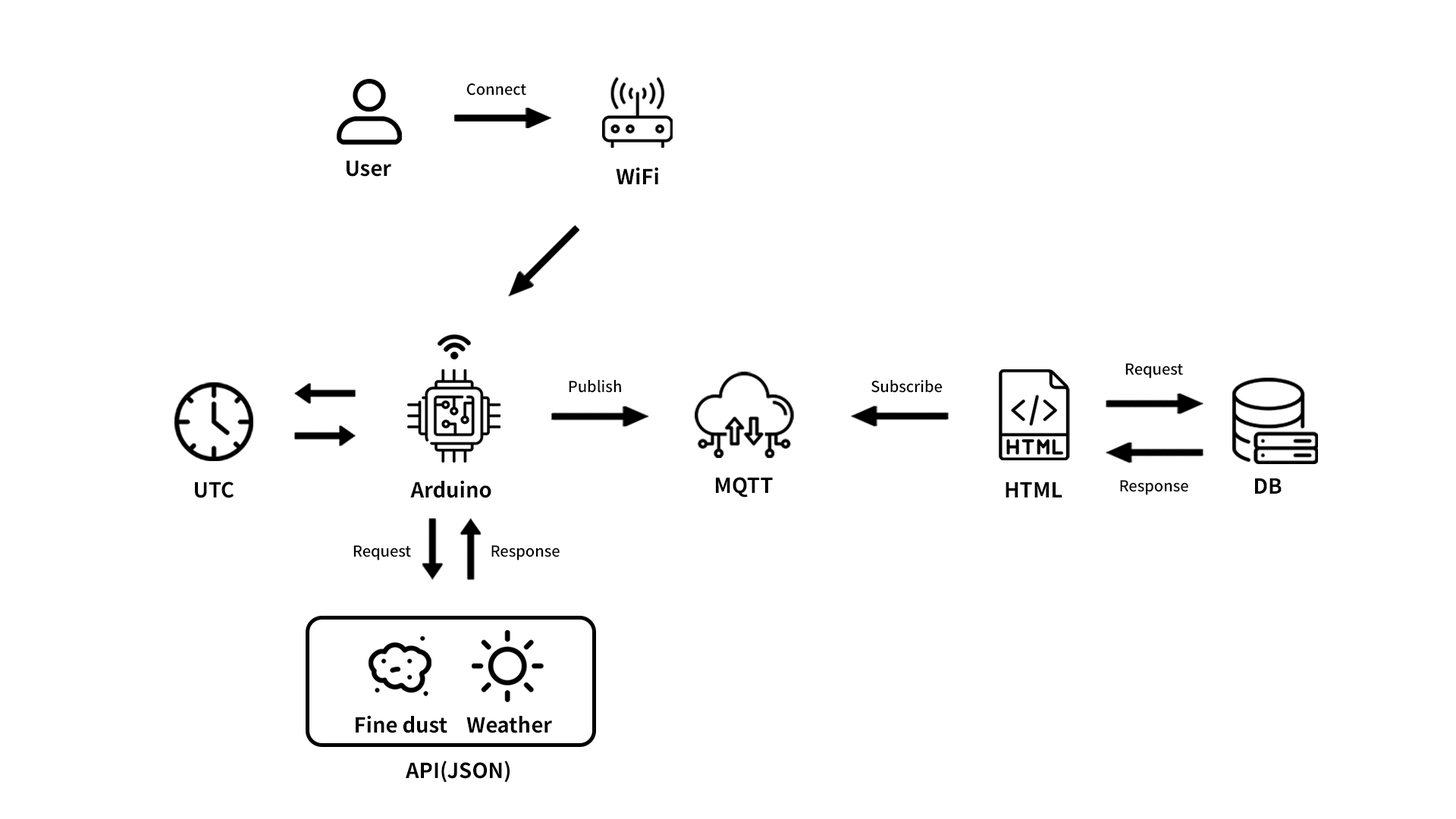
<style>
.page{position:relative;width:1456px;height:819px;background:#ffffff}
.page>*{position:absolute;margin:0}
.t1{font:15.2px "NotoSansKR-Medium";color:#000000}
.t2{font:20.8px "NotoSansKR-Bold";color:#000000}
</style>
<div class="page">
<p class="t1" style="left:466px;top:83px;width:60px;height:13px">Connect</p>
<p class="t2" style="left:347px;top:160px;width:44px;height:17px">User</p>
<p class="t2" style="left:616px;top:167px;width:42px;height:17px">WiFi</p>
<p class="t1" style="left:1125px;top:363px;width:58px;height:15px">Request</p>
<p class="t1" style="left:569px;top:380px;width:52px;height:13px">Publish</p>
<p class="t1" style="left:871px;top:380px;width:71px;height:13px">Subscribe</p>
<p class="t2" style="left:195px;top:482px;width:39px;height:16px">UTC</p>
<p class="t2" style="left:410px;top:480px;width:81px;height:18px">Arduino</p>
<p class="t2" style="left:716px;top:477px;width:57px;height:20px">MQTT</p>
<p class="t2" style="left:1006px;top:482px;width:56px;height:15px">HTML</p>
<p class="t1" style="left:1120px;top:480px;width:68px;height:15px">Response</p>
<p class="t2" style="left:1255px;top:478px;width:27px;height:16px">DB</p>
<p class="t1" style="left:353px;top:545px;width:58px;height:15px">Request</p>
<p class="t1" style="left:491px;top:545px;width:69px;height:15px">Response</p>
<p class="t2" style="left:356px;top:715px;width:91px;height:18px">Fine dust</p>
<p class="t2" style="left:466px;top:716px;width:86px;height:17px">Weather</p>
<p class="t2" style="left:406px;top:761px;width:104px;height:22px">API(JSON)</p>
</div>
